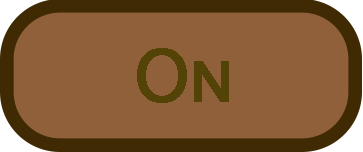
<style>
.page{position:relative;width:363px;height:152px;background:#8f6039}
.page>*{position:absolute;margin:0}
.t1{font:72px "ArialMT";letter-spacing:-0.025em;color:#544306;font-variant:small-caps;font-weight:bold}
</style>
<div class="page">
<p class="t1" style="left:137px;top:48px;width:92px;height:55px">On</p>
</div>
